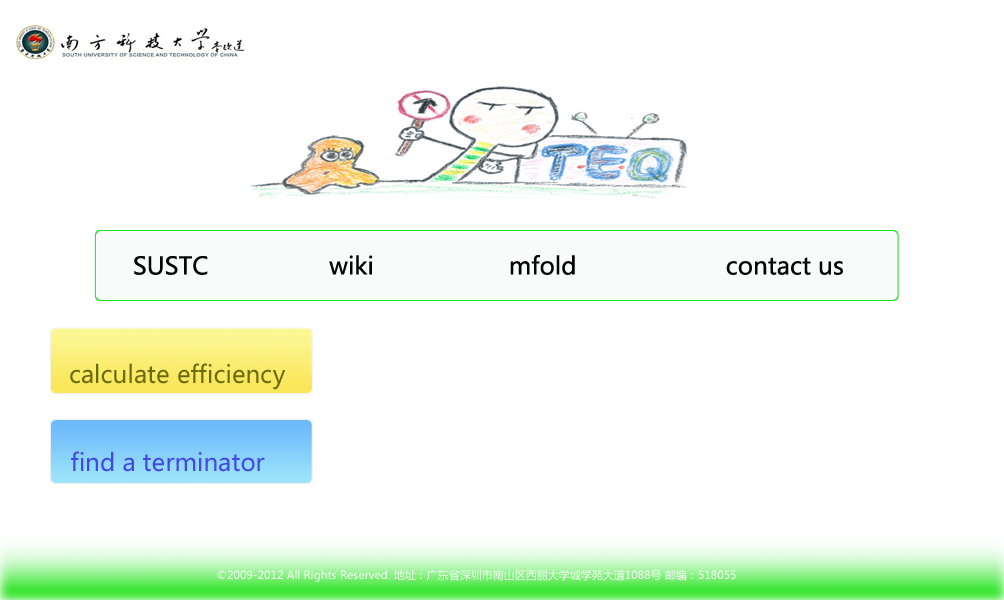
<style>
.page{position:relative;width:1004px;height:600px;background:#ffffff}
.page>*{position:absolute;margin:0}
.t1{font:24px "MicrosoftYaHei";color:#060606}
.t2{font:24px "MicrosoftYaHei";color:#6a6b0c}
.t3{font:24px "MicrosoftYaHei";color:#4447e3}
.t4{font:11px "MicrosoftYaHei";color:#fafcfa}
</style>
<div class="page">
<p class="t1" style="left:134px;top:255px;width:709px;height:20px">SUSTC                 wiki                   mfold                     contact us</p>
<p class="t2" style="left:70px;top:363px;width:216px;height:27px">calculate efficiency</p>
<p class="t3" style="left:71px;top:451px;width:194px;height:21px">find a terminator</p>
<p class="t4" style="left:217px;top:569px;width:519px;height:13px">©2009-2012 All Rights Reserved. 地址：广东省深圳市南山区西丽大学城学苑大道1088号 邮编：518055</p>
</div>
